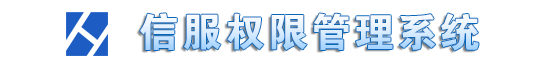
<style>
.page{position:relative;width:560px;height:61px;background:#ffffff}
.page>*{position:absolute;margin:0}
.t1{font:40px "FZDHTJW--GB1-0";letter-spacing:0.075em}
</style>
<div class="page">
<p class="t1" style="left:140px;top:13px;width:339px;height:38px">信服权限管理系统</p>
</div>
